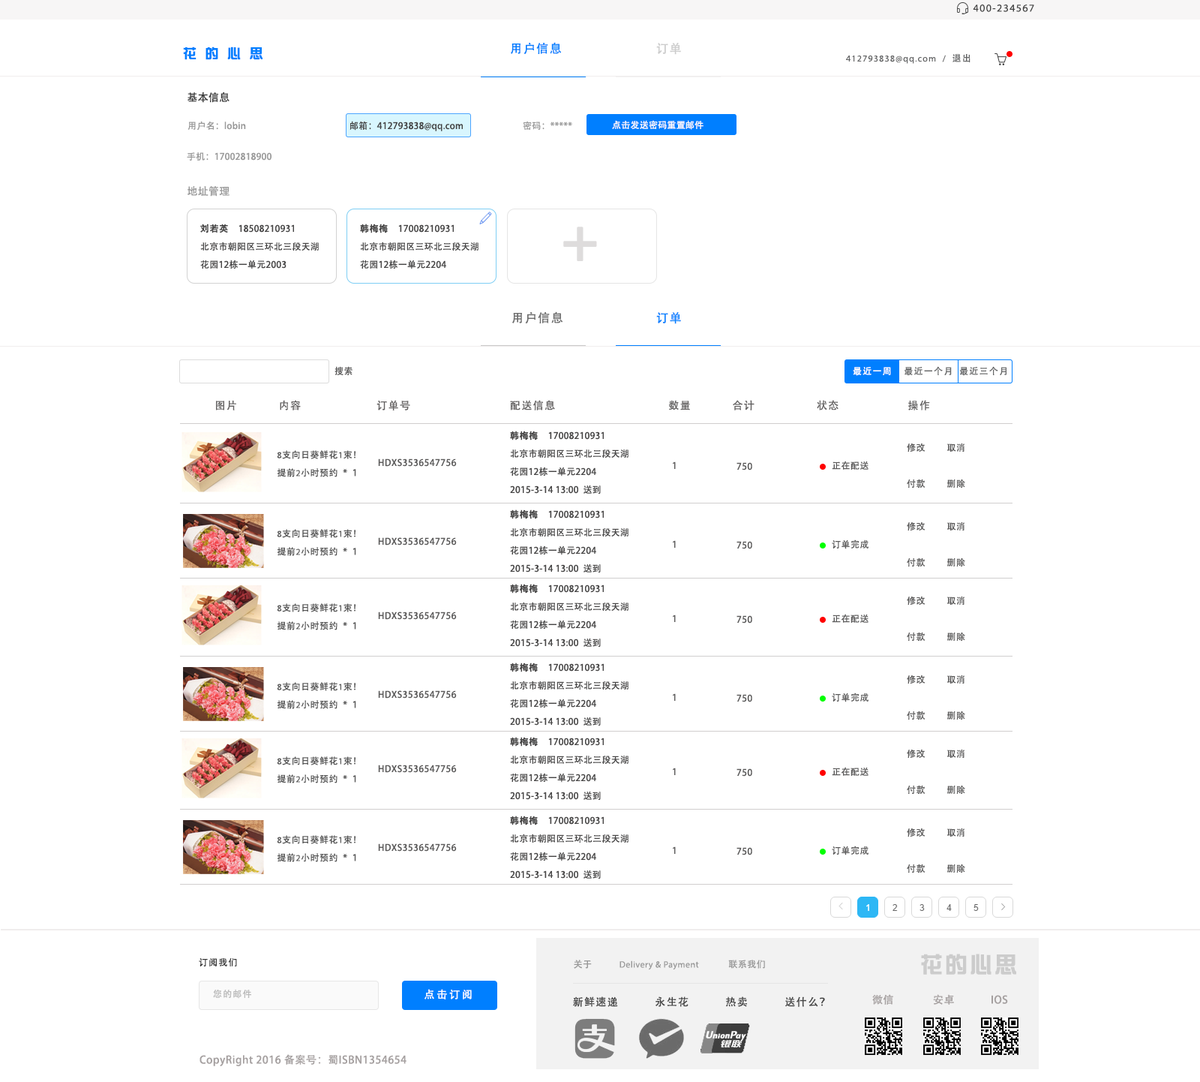
<style>
.page{position:relative;width:1200px;height:1082px;background:#ffffff}
.page>*{position:absolute;margin:0}
.t1{font:10.5px "MyriadPro-Regular";letter-spacing:0.1em;color:#444444}
.t2{font:13.5px "DFZongYi-Bd-80-Win-GB";letter-spacing:0.64em;color:#007fff}
.t3{font:12px "AdobeHeitiStd-Regular";letter-spacing:0.1em;color:#007fff}
.t4{font:12px "AdobeHeitiStd-Regular";letter-spacing:0.1em;color:#cccccc}
.t5{font:9px "MyriadPro-Regular";letter-spacing:0.1em;color:#646566}
.t6{font:9px "AdobeHeitiStd-Regular";letter-spacing:0.1em;color:#646566}
.t7{font:10.5px "AdobeHeitiStd-Regular";letter-spacing:0.02em;color:#373737}
.t8{font:9px "AdobeHeitiStd-Regular";letter-spacing:0.02em;color:#999999}
.t9{font:9px "AdobeHeitiStd-Regular";letter-spacing:0.02em;color:#444343}
.t10{font:9px "AdobeHeitiStd-Regular";letter-spacing:0.02em;color:#fdfbfb}
.t11{font:10.5px "AdobeHeitiStd-Regular";letter-spacing:0.02em;color:#999999}
.t12{font:9px/18px "AdobeHeitiStd-Regular";letter-spacing:0.02em;color:#464545}
.t13{font:9px/18px "AdobeHeitiStd-Regular";letter-spacing:0.02em;color:#464545;font-weight:bold}
.t14{font:54px "AdobeHeitiStd-Regular";letter-spacing:0.02em;color:#dedcdc;font-weight:bold}
.t15{font:12px "AdobeHeitiStd-Regular";letter-spacing:0.1em;color:#6e6e6e}
.t16{font:9px "AdobeHeitiStd-Regular";letter-spacing:0.04em;color:#5b5a5a}
.t17{font:9px "AdobeHeitiStd-Regular";letter-spacing:0.1em;color:#feffff}
.t18{font:10.5px "AdobeHeitiStd-Regular";letter-spacing:0.1em;color:#636161}
.t19{font:9px/18px "AdobeHeitiStd-Regular";letter-spacing:0.04em;color:#5b5a5a}
.t20{font:9px/18px "AdobeHeitiStd-Regular";letter-spacing:0.04em;color:#555555}
.t21{font:9px/18px "MyriadPro-Regular";letter-spacing:0.04em;color:#555555}
.t22{font:22.5px "DFZongYi-Bd-80-Win-GB";letter-spacing:0.1em;color:#cccccc}
.t23{font:9px "AdobeHeitiStd-Regular";letter-spacing:0.1em;color:#333333;text-transform:uppercase}
.t24{font:9px "MyriadPro-Regular";letter-spacing:0.04em;color:#999999}
.t25{font:9px "AdobeHeitiStd-Regular";letter-spacing:0.04em;color:#999999}
.t26{font:9px "AdobeHeitiStd-Regular";letter-spacing:0.1em;color:#bbbbbb}
.t27{font:10.5px "AdobeHeitiStd-Regular";letter-spacing:0.2em;color:#ffffff;text-transform:uppercase}
.t28{font:10.5px "AdobeHeitiStd-Regular";letter-spacing:0.1em;color:#444444}
.t29{font:10.5px "AdobeHeitiStd-Regular";letter-spacing:0.04em;color:#a5a0a0}
</style>
<div class="page">
<p class="t1" style="left:973px;top:4px;width:61px;height:8px">400-234567</p>
<p class="t2" style="left:183px;top:46px;width:79px;height:14px">花的心思</p>
<p class="t3" style="left:511px;top:42px;width:51px;height:12px">用户信息</p>
<p class="t4" style="left:656px;top:43px;width:25px;height:12px">订单</p>
<p class="t5" style="left:846px;top:54px;width:124px;height:10px">412793838@qq.com  /  <span class="t6">退出</span></p>
<p class="t7" style="left:188px;top:92px;width:42px;height:11px">基本信息</p>
<p class="t8" style="left:188px;top:121px;width:58px;height:9px">用户名：lobin</p>
<p class="t9" style="left:350px;top:121px;width:113px;height:10px">邮箱：412793838@qq.com</p>
<p class="t8" style="left:523px;top:121px;width:49px;height:9px">密码：*****</p>
<p class="t10" style="left:612px;top:120px;width:92px;height:10px">点击发送密码重置邮件</p>
<p class="t8" style="left:187px;top:152px;width:85px;height:8px">手机：17002818900</p>
<p class="t11" style="left:188px;top:186px;width:42px;height:10px">地址管理</p>
<p class="t12" style="left:200px;top:224px;width:119px;height:45px"><span class="t13">刘若英    </span>18508210931<br>北京市朝阳区三环北三段天湖<br>花园12栋一单元2003</p>
<p class="t12" style="left:360px;top:224px;width:118px;height:45px"><span class="t13">韩梅梅    </span>17008210931<br>北京市朝阳区三环北三段天湖<br>花园12栋一单元2204</p>
<p class="t14" style="left:563px;top:226px;width:34px;height:35px">+</p>
<p class="t15" style="left:512px;top:311px;width:51px;height:12px">用户信息</p>
<p class="t3" style="left:656px;top:312px;width:25px;height:12px">订单</p>
<p class="t16" style="left:334px;top:366px;width:18px;height:9px">搜索</p>
<p class="t6" style="left:853px;top:366px;width:153px;height:10px"><span class="t17">最近一周    </span>最近一个月  最近三个月</p>
<p class="t18" style="left:216px;top:400px;width:714px;height:10px">图片            内容                      订单号                             配送信息                                 数量            合计                  状态                    操作</p>
<p class="t12" style="left:510px;top:430px;width:118px;height:64px"><span class="t13">韩梅梅    </span>17008210931<br>北京市朝阳区三环北三段天湖<br>花园12栋一单元2204<br>2015-3-14 13:00  送到</p>
<p class="t19" style="left:907px;top:442px;width:58px;height:46px">修改         取消<br><br>付款         删除</p>
<p class="t20" style="left:277px;top:450px;width:79px;height:27px"><span class="t21">8</span>支向日葵鲜花<span class="t21">1</span>束！<br>提前<span class="t21">2</span>小时预约  *  1</p>
<p class="t16" style="left:378px;top:458px;width:79px;height:8px">HDXS3536547756</p>
<p class="t16" style="left:673px;top:461px;width:3px;height:8px">1</p>
<p class="t16" style="left:736px;top:462px;width:16px;height:8px">750</p>
<p class="t16" style="left:832px;top:460px;width:36px;height:10px">正在配送</p>
<p class="t12" style="left:510px;top:509px;width:118px;height:63px"><span class="t13">韩梅梅    </span>17008210931<br>北京市朝阳区三环北三段天湖<br>花园12栋一单元2204<br>2015-3-14 13:00  送到</p>
<p class="t19" style="left:907px;top:521px;width:58px;height:45px">修改         取消<br><br>付款         删除</p>
<p class="t20" style="left:277px;top:529px;width:79px;height:27px"><span class="t21">8</span>支向日葵鲜花<span class="t21">1</span>束！<br>提前<span class="t21">2</span>小时预约  *  1</p>
<p class="t16" style="left:378px;top:537px;width:79px;height:8px">HDXS3536547756</p>
<p class="t16" style="left:673px;top:540px;width:3px;height:8px">1</p>
<p class="t16" style="left:736px;top:541px;width:16px;height:8px">750</p>
<p class="t16" style="left:832px;top:539px;width:36px;height:10px">订单完成</p>
<p class="t12" style="left:510px;top:584px;width:118px;height:62px"><span class="t13">韩梅梅    </span>17008210931<br>北京市朝阳区三环北三段天湖<br>花园12栋一单元2204<br>2015-3-14 13:00  送到</p>
<p class="t20" style="left:277px;top:603px;width:79px;height:27px"><span class="t21">8</span>支向日葵鲜花<span class="t21">1</span>束！<br>提前<span class="t21">2</span>小时预约  *  1</p>
<p class="t19" style="left:907px;top:596px;width:58px;height:44px">修改         取消<br><br>付款         删除</p>
<p class="t16" style="left:378px;top:611px;width:79px;height:9px">HDXS3536547756</p>
<p class="t16" style="left:673px;top:614px;width:3px;height:8px">1</p>
<p class="t16" style="left:736px;top:615px;width:16px;height:8px">750</p>
<p class="t16" style="left:832px;top:614px;width:36px;height:8px">正在配送</p>
<p class="t12" style="left:510px;top:662px;width:118px;height:63px"><span class="t13">韩梅梅    </span>17008210931<br>北京市朝阳区三环北三段天湖<br>花园12栋一单元2204<br>2015-3-14 13:00  送到</p>
<p class="t19" style="left:907px;top:674px;width:58px;height:45px">修改         取消<br><br>付款         删除</p>
<p class="t20" style="left:277px;top:682px;width:79px;height:27px"><span class="t21">8</span>支向日葵鲜花<span class="t21">1</span>束！<br>提前<span class="t21">2</span>小时预约  *  1</p>
<p class="t16" style="left:378px;top:690px;width:79px;height:8px">HDXS3536547756</p>
<p class="t16" style="left:673px;top:693px;width:3px;height:7px">1</p>
<p class="t16" style="left:736px;top:694px;width:16px;height:8px">750</p>
<p class="t16" style="left:832px;top:692px;width:36px;height:10px">订单完成</p>
<p class="t12" style="left:510px;top:736px;width:118px;height:64px"><span class="t13">韩梅梅    </span>17008210931<br>北京市朝阳区三环北三段天湖<br>花园12栋一单元2204<br>2015-3-14 13:00  送到</p>
<p class="t19" style="left:907px;top:748px;width:58px;height:46px">修改         取消<br><br>付款         删除</p>
<p class="t20" style="left:277px;top:756px;width:79px;height:27px"><span class="t21">8</span>支向日葵鲜花<span class="t21">1</span>束！<br>提前<span class="t21">2</span>小时预约  *  1</p>
<p class="t16" style="left:378px;top:764px;width:79px;height:8px">HDXS3536547756</p>
<p class="t16" style="left:673px;top:767px;width:3px;height:8px">1</p>
<p class="t16" style="left:736px;top:768px;width:16px;height:8px">750</p>
<p class="t16" style="left:832px;top:766px;width:36px;height:10px">正在配送</p>
<p class="t12" style="left:510px;top:815px;width:118px;height:63px"><span class="t13">韩梅梅    </span>17008210931<br>北京市朝阳区三环北三段天湖<br>花园12栋一单元2204<br>2015-3-14 13:00  送到</p>
<p class="t19" style="left:907px;top:827px;width:58px;height:45px">修改         取消<br><br>付款         删除</p>
<p class="t20" style="left:277px;top:835px;width:79px;height:27px"><span class="t21">8</span>支向日葵鲜花<span class="t21">1</span>束！<br>提前<span class="t21">2</span>小时预约  *  1</p>
<p class="t16" style="left:378px;top:843px;width:79px;height:8px">HDXS3536547756</p>
<p class="t16" style="left:673px;top:846px;width:3px;height:8px">1</p>
<p class="t16" style="left:832px;top:845px;width:36px;height:10px">订单完成</p>
<p class="t16" style="left:736px;top:847px;width:16px;height:8px">750</p>
<p class="t22" style="left:921px;top:953px;width:95px;height:21px">花的心思</p>
<p class="t23" style="left:199px;top:958px;width:38px;height:8px">订阅我们</p>
<p class="t24" style="left:574px;top:959px;width:191px;height:11px"><span class="t25">关于</span>            Delivery &amp; Payment             <span class="t25">联系我们</span></p>
<p class="t26" style="left:213px;top:988px;width:38px;height:10px">您的邮件</p>
<p class="t27" style="left:424px;top:988px;width:48px;height:11px">点击订阅</p>
<p class="t28" style="left:573px;top:996px;width:252px;height:10px">新鲜速递           永生花           热卖           送什么？</p>
<p class="t29" style="left:872px;top:994px;width:136px;height:10px">微信              安卓             IOS</p>
<p class="t29" style="left:200px;top:1054px;width:206px;height:12px">CopyRight 2016 备案号：蜀ISBN1354654</p>
</div>
